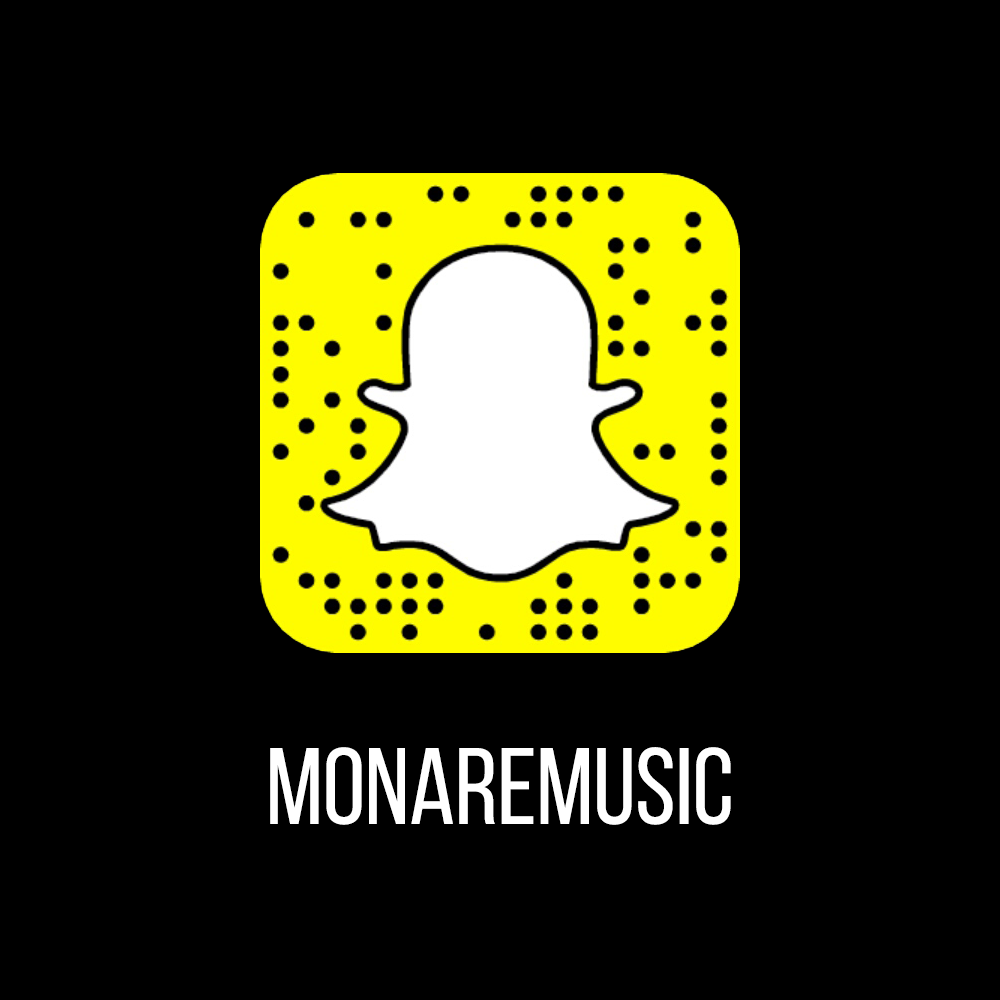
<style>
.page{position:relative;width:1000px;height:1000px;background:#000000}
.page>*{position:absolute;margin:0}
.t1{font:108.3px "BebasNeueRegular";color:#ffffff}
</style>
<div class="page">
<p class="t1" style="left:270px;top:747px;width:461px;height:78px">Monaremusic</p>
</div>
